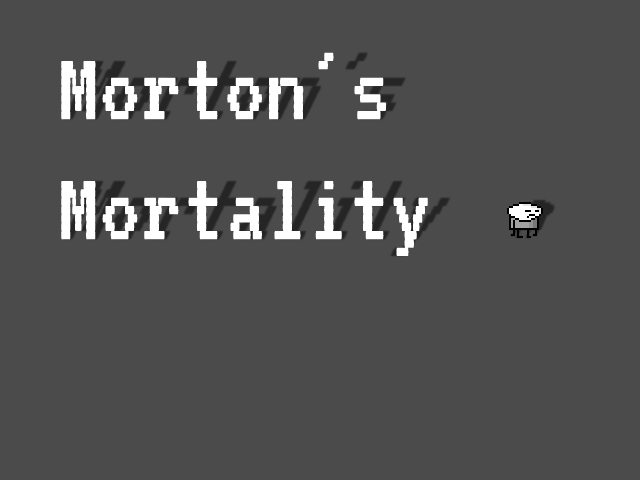
<style>
.page{position:relative;width:640px;height:480px;background:#4b4b4b}
.page>*{position:absolute;margin:0}
.t1{font:100px "VT323";color:#ffffff}
</style>
<div class="page">
<p class="t1" style="left:61px;top:52px;width:367px;height:204px">Morton's<br>Mortality</p>
</div>
